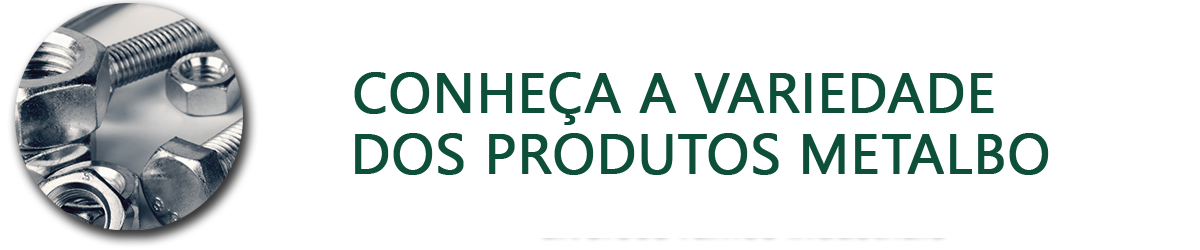
<style>
.page{position:relative;width:1200px;height:250px;background:#ffffff}
.page>*{position:absolute;margin:0}
.t1{font:56.4px "NirmalaUI";color:#0d4f38;font-weight:bold}
</style>
<div class="page">
<p class="t1" style="left:354px;top:72px;width:640px;height:53px">CONHEÇA A VARIEDADE</p>
<p class="t1" style="left:355px;top:133px;width:694px;height:42px">DOS PRODUTOS METALBO</p>
</div>
